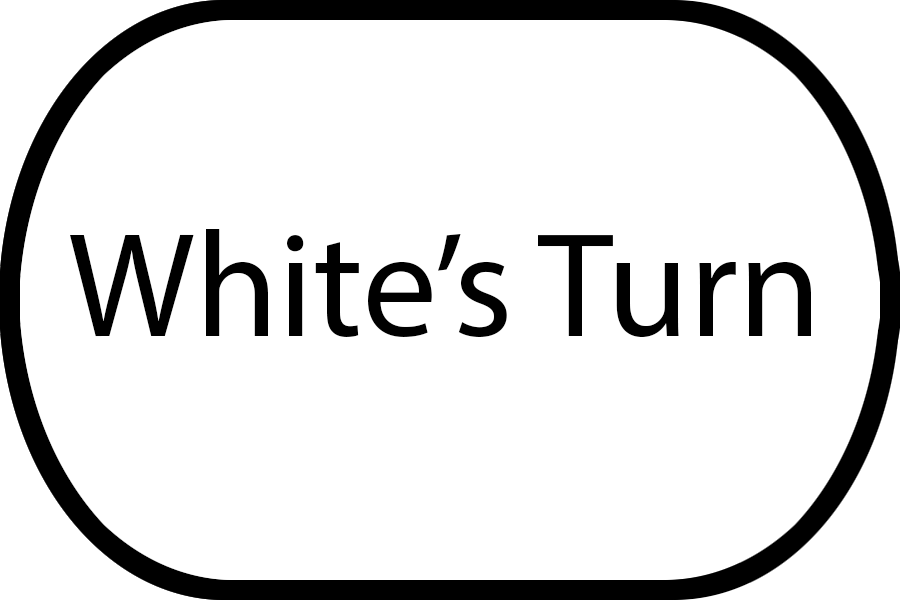
<style>
.page{position:relative;width:900px;height:600px;background:#ffffff}
.page>*{position:absolute;margin:0}
.t1{font:150px "MyriadPro-Regular";color:#000000}
</style>
<div class="page">
<p class="t1" style="left:70px;top:229px;width:741px;height:108px">White’s Turn</p>
</div>
